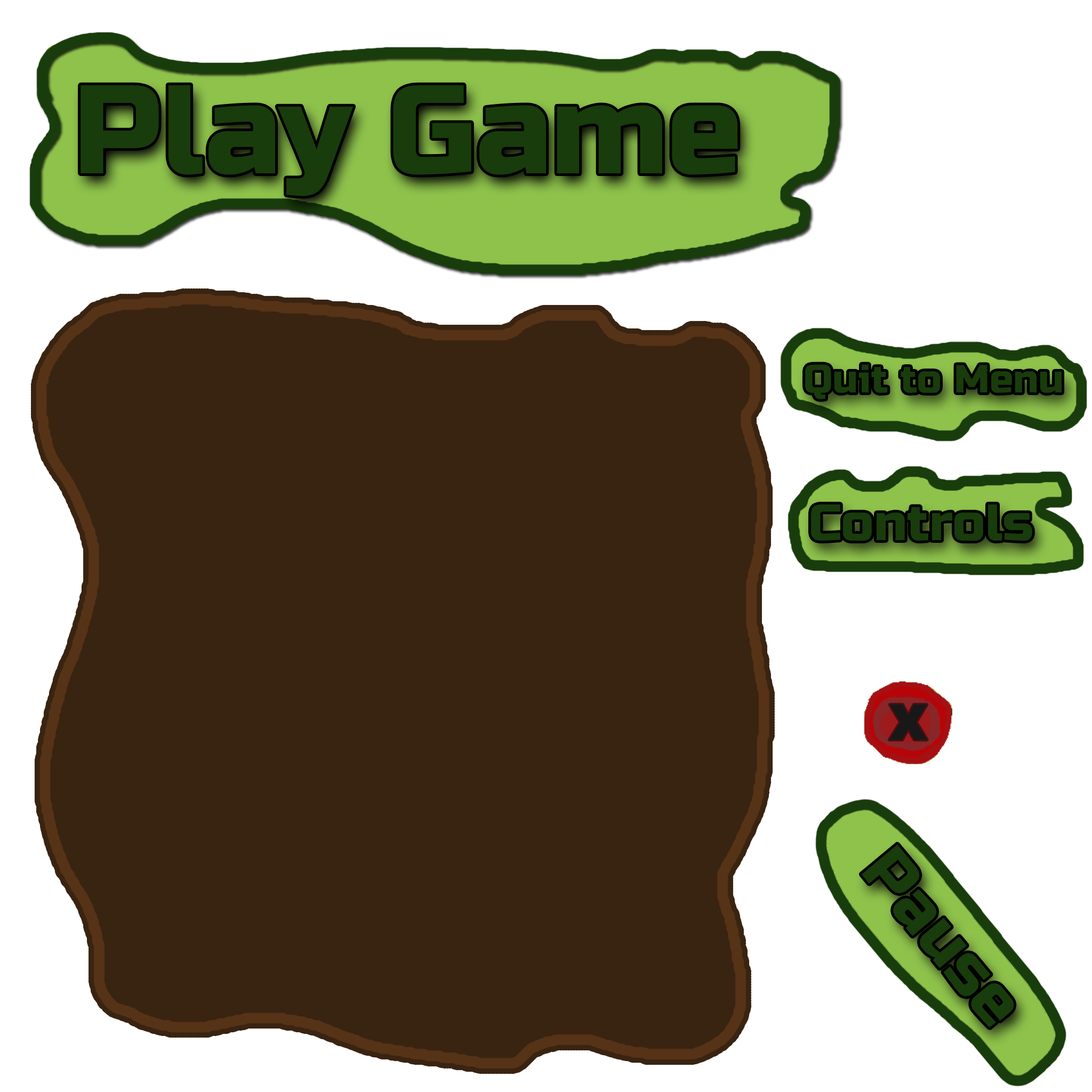
<style>
.page{position:relative;width:1092px;height:1092px;background:#392311}
.page>*{position:absolute;margin:0}
.t1{font:125.6px "RussoOne-Regular";color:#193c0c}
.t2{font:39.2px "RussoOne-Regular";color:#193c0c}
.t3{font:66.6px "RussoOne-Regular";color:#181818}
.t4{font:66.6px "RussoOne-Regular";color:#193c0c}
</style>
<div class="page">
<p class="t1" style="left:81px;top:85px;width:657px;height:111px">Play Game</p>
<p class="t2" style="left:805px;top:364px;width:257px;height:35px">Quit to Menu</p>
<p class="t3" style="left:889px;top:704px;width:38px;height:36px">x</p>
<p class="t4" style="left:861px;top:844px;width:153px;height:183px;rotate:50deg">Pause</p>
</div>
